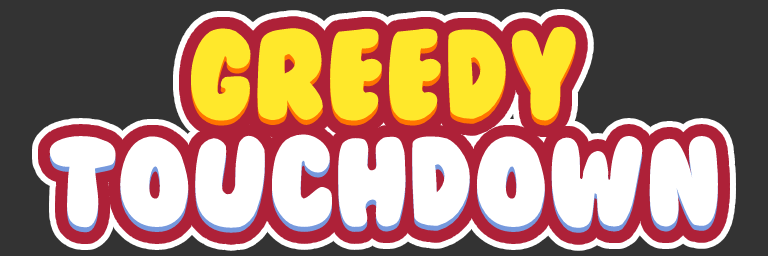
<style>
.page{position:relative;width:768px;height:256px;background:#333333}
.page>*{position:absolute;margin:0}
.t1{font:117.1px "BubbleGum";color:#ffe82b}
.t2{font:117.1px "BubbleGum";color:#ffffff}
</style>
<div class="page">
<p class="t1" style="left:191px;top:26px;width:385px;height:95px">GREEDY</p>
<p class="t2" style="left:49px;top:134px;width:669px;height:94px">TOUCHDOWN</p>
</div>
